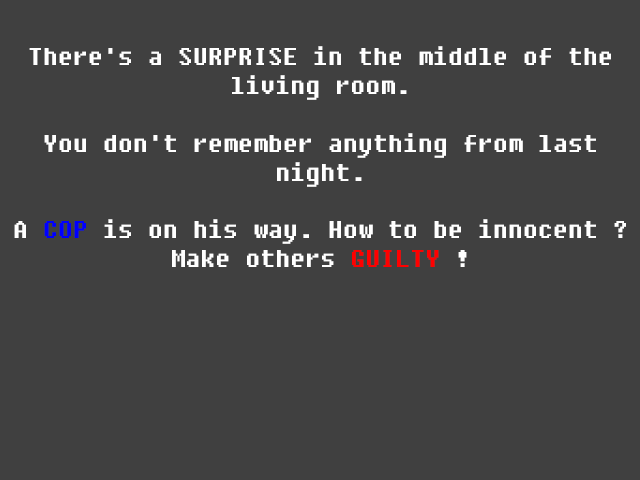
<style>
.page{position:relative;width:640px;height:480px;background:#404040}
.page>*{position:absolute;margin:0}
.t1{font:24px "Fixedsys";color:#ffffff}
.t2{font:24px "Fixedsys";color:#0000ff}
.t3{font:24px "Fixedsys";color:#ff0000}
</style>
<div class="page">
<p class="t1" style="left:14px;top:46px;width:612px;height:221px;text-align:center">There's a SURPRISE in the middle of the living room.<br><br>You don't remember anything from last night.<br><br>A <span class="t2">COP</span> is on his way. How to be innocent ? Make others <span class="t3">GUILTY</span> !</p>
</div>
